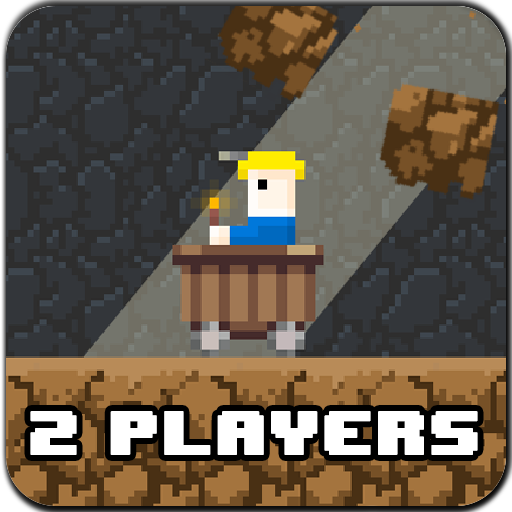
<style>
.page{position:relative;width:512px;height:512px}
.page>*{position:absolute;margin:0}
.t1{font:50.7px "8BITWONDERNominal";letter-spacing:-0.025em;color:#ffffff;text-transform:uppercase;font-weight:bold;scale:1.05 1}
</style>
<div class="page">
<p class="t1" style="left:30px;top:411px;width:448px;height:44px">2 players</p>
</div>
